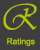
<style>
.page{position:relative;width:40px;height:50px;background:#3e3e3e}
.page>*{position:absolute;margin:0}
.t1{font:37.3px "Vivaldii";color:#b5c501;scale:0.86 1}
.t2{font:8.3px "ArialMT";color:#b5c501}
</style>
<div class="page">
<p class="t1" style="left:3px;top:3px;width:34px;height:27px">R</p>
<p class="t2" style="left:7px;top:38px;width:28px;height:9px">Ratings</p>
</div>
